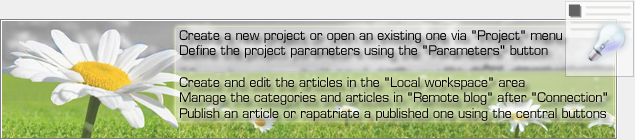
<style>
.page{position:relative;width:635px;height:140px}
.page>*{position:absolute;margin:0}
.t1{font:6px "TimesNewRomanPSMT";color:#5d5d5d}
.t2{font:13px "Metrostyle-Regular";color:#000000}
</style>
<div class="page">
<p class="t1" style="left:570px;top:6px;width:60px;height:23px">_______________<br>          _______________<br>____________________<br>____________________</p>
<p class="t2" style="left:179px;top:30px;width:383px;height:28px">Create a new project or open an existing one via "Project" menu<br>Define the project parameters using the "Parameters" button</p>
<p class="t2" style="left:179px;top:77px;width:428px;height:44px">Create and edit the articles in the "Local workspace" area<br>Manage the categories and articles in "Remote blog" after "Connection"<br>Publish an article or rapatriate a published one using the central buttons</p>
</div>
